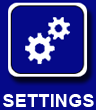
<style>
.page{position:relative;width:96px;height:110px;background:#050989}
.page>*{position:absolute;margin:0}
.t1{font:18.5px "Arial-BoldMT";color:#feffff}
</style>
<div class="page">
<p class="t1" style="left:3px;top:94px;width:91px;height:13px">SETTINGS</p>
</div>
